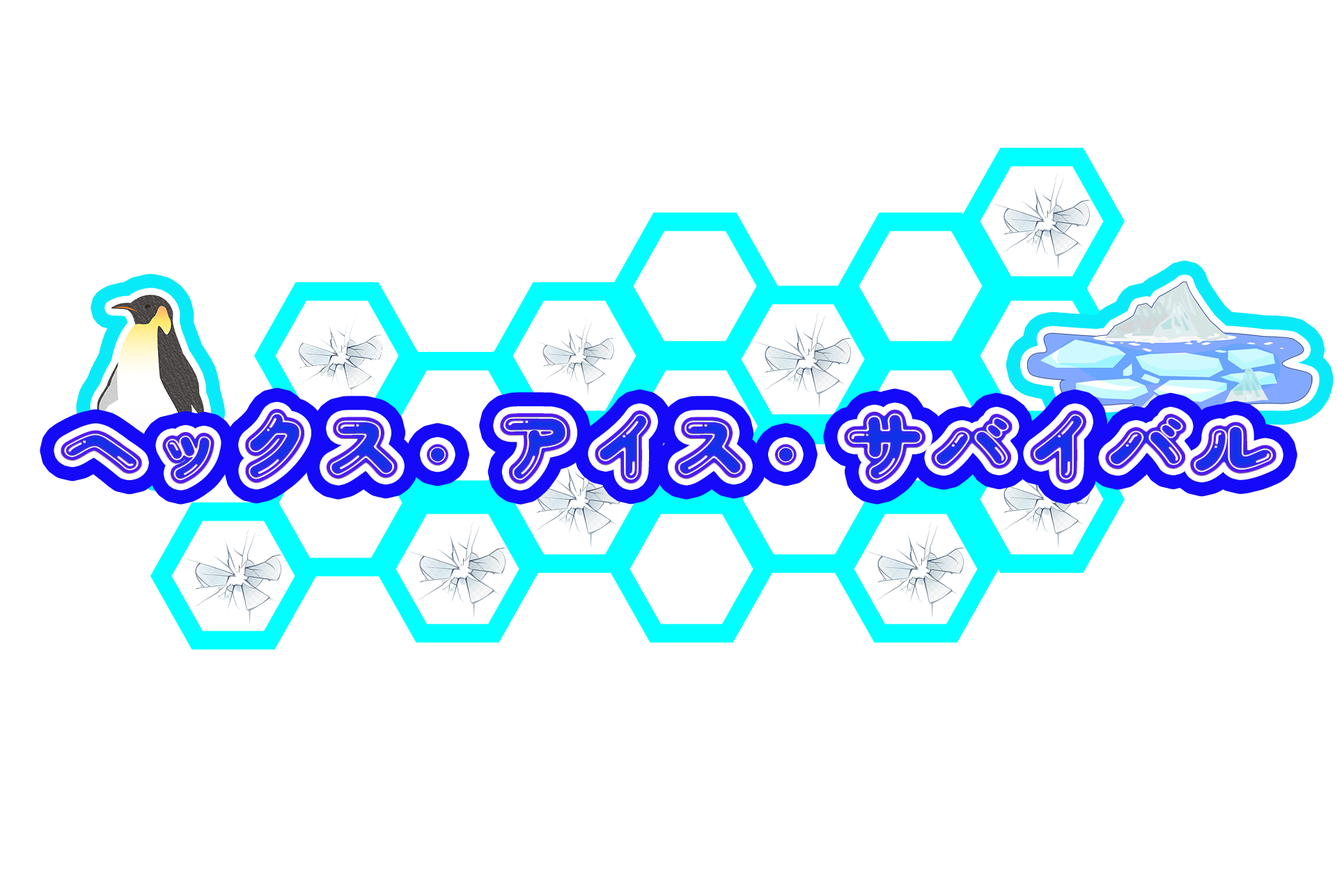
<style>
.page{position:relative;width:1337px;height:892px;background:#ffffff}
.page>*{position:absolute;margin:0}
.t1{font:87.1px "DokiDokiFantasia"}
</style>
<div class="page">
<p class="t1" style="left:61px;top:408px;width:1216px;height:75px">ヘックス・アイス・サバイバル</p>
</div>
